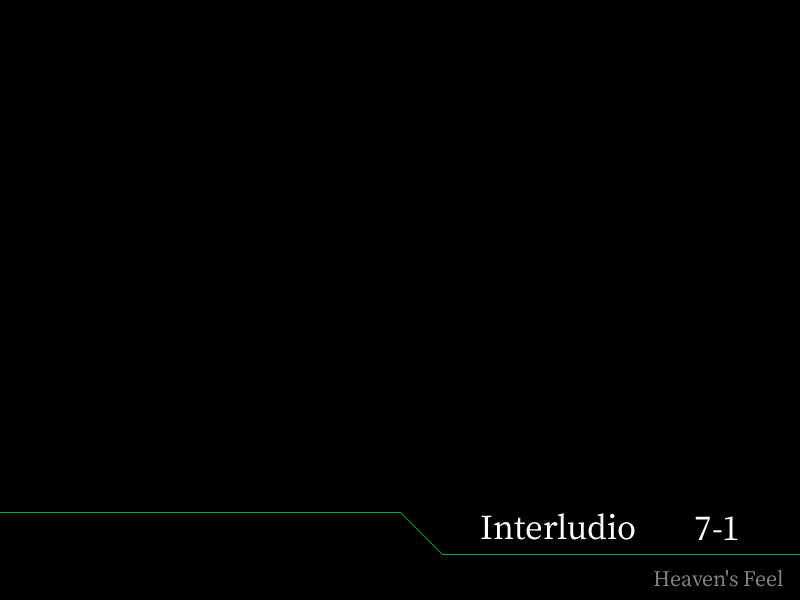
<style>
.page{position:relative;width:800px;height:600px;background:#000000}
.page>*{position:absolute;margin:0}
.t1{font:38px "OfficialFateFont-Medium";color:#ffffff}
.t2{font:24px "OfficialFateFont-Medium";color:#838383}
</style>
<div class="page">
<p class="t1" style="left:481px;top:513px;width:154px;height:27px">Interludio</p>
<p class="t1" style="left:695px;top:516px;width:43px;height:24px">7-1</p>
<p class="t2" style="left:653px;top:569px;width:130px;height:18px">Heaven's Feel</p>
</div>
